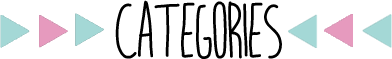
<style>
.page{position:relative;width:392px;height:59px;background:#ffffff}
.page>*{position:absolute;margin:0}
.t1{font:76.4px "Bite___Bullet";letter-spacing:-0.08em;color:#000000}
</style>
<div class="page">
<p class="t1" style="left:115px;top:0px;width:167px;height:59px">categories</p>
</div>
